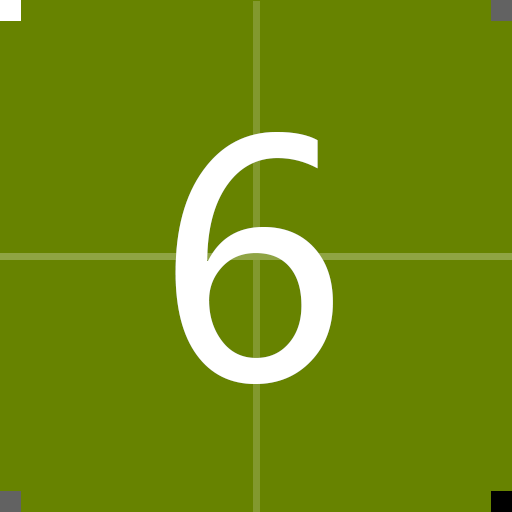
<style>
.page{position:relative;width:512px;height:512px;background:#678300}
.page>*{position:absolute;margin:0}
.t1{font:323.1px "MicrosoftYaHei";color:#ffffff}
</style>
<div class="page">
<p class="t1" style="left:175px;top:132px;width:158px;height:252px">6</p>
</div>
